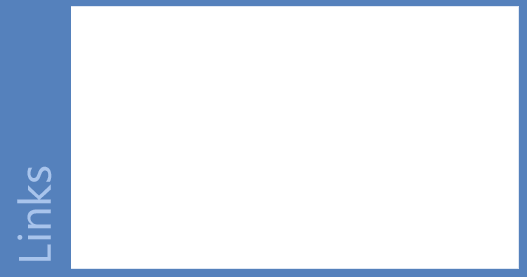
<style>
.page{position:relative;width:527px;height:277px;background:#ffffff}
.page>*{position:absolute;margin:0}
.t1{font:45.3px "Gadugi";color:#a8c4ec}
</style>
<div class="page">
<p class="t1" style="left:17px;top:166px;width:35px;height:95px;rotate:-90deg">Links</p>
</div>
